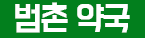
<style>
.page{position:relative;width:145px;height:38px;background:#027f1d}
.page>*{position:absolute;margin:0}
.t1{font:30px "BMDoHyeon";letter-spacing:-0.07em;color:#ffffff}
</style>
<div class="page">
<p class="t1" style="left:15px;top:2px;width:115px;height:31px">범촌 약국</p>
</div>
